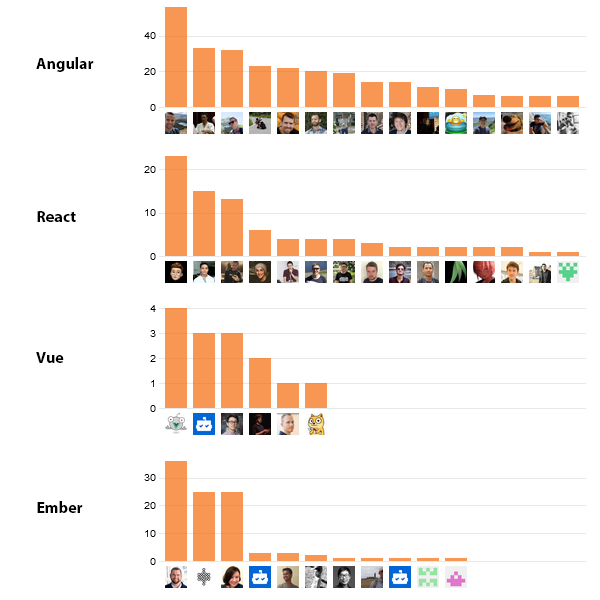
<style>
.page{position:relative;width:600px;height:600px;background:#ffffff}
.page>*{position:absolute;margin:0}
.t1{font:16px "MyriadPro-Bold";color:#000000}
</style>
<div class="page">
<p class="t1" style="left:36px;top:57px;width:58px;height:15px">Angular</p>
<p class="t1" style="left:37px;top:211px;width:39px;height:11px">React</p>
<p class="t1" style="left:36px;top:352px;width:28px;height:11px">Vue</p>
<p class="t1" style="left:37px;top:501px;width:46px;height:12px">Ember</p>
</div>
